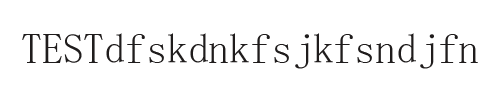
<style>
.page{position:relative;width:500px;height:100px;background:#ffffff}
.page>*{position:absolute;margin:0}
.t1{font:41.7px "SimSun";color:#1f1c1c}
</style>
<div class="page">
<p class="t1" style="left:22px;top:33px;width:456px;height:36px">TESTdfskdnkfsjkfsndjfn</p>
</div>
